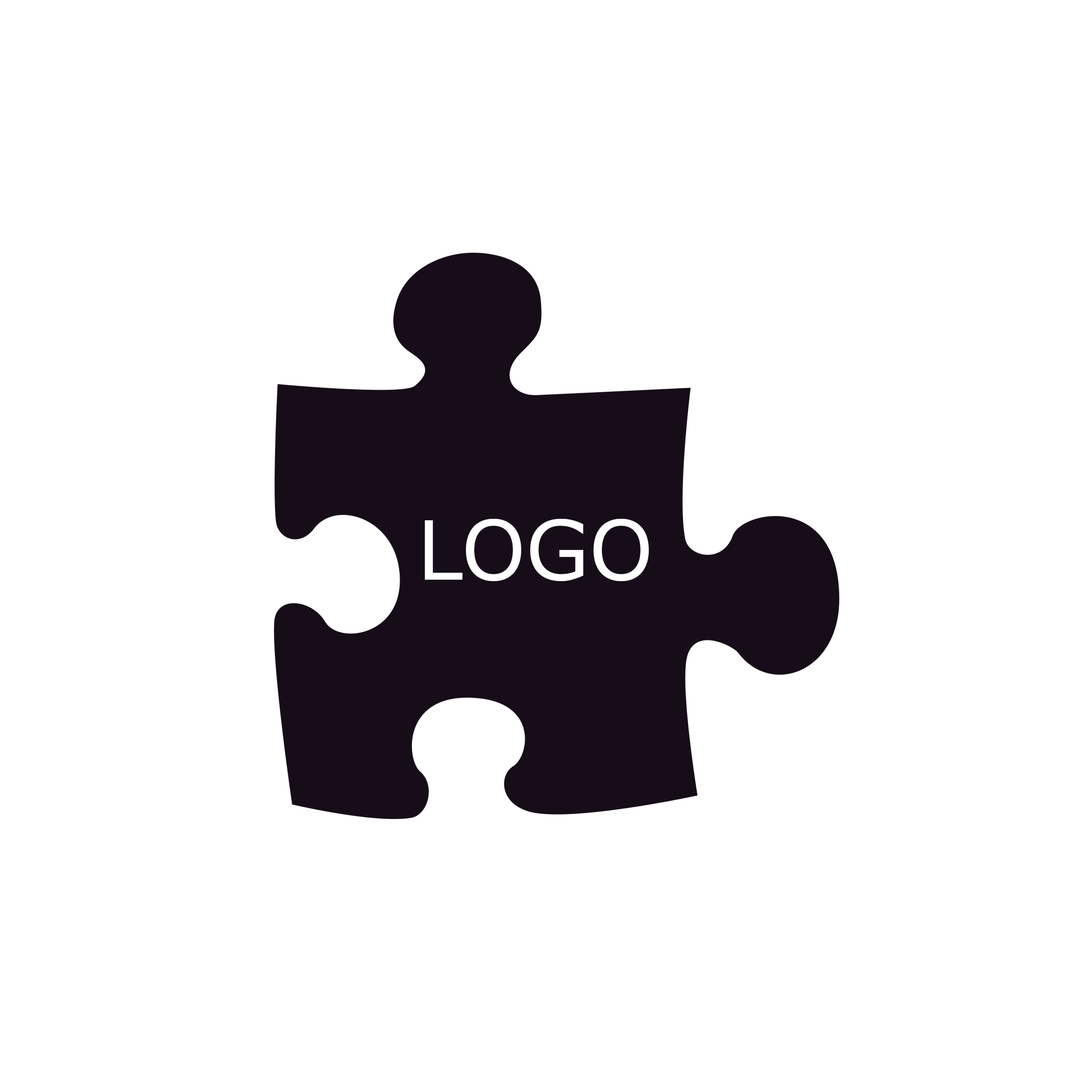
<style>
.page{position:relative;width:1092px;height:1092px;background:#ffffff}
.page>*{position:absolute;margin:0}
.t1{font:81.4px "Verdana";color:#ffffff}
</style>
<div class="page">
<p class="t1" style="left:425px;top:519px;width:224px;height:62px">LOGO</p>
</div>
